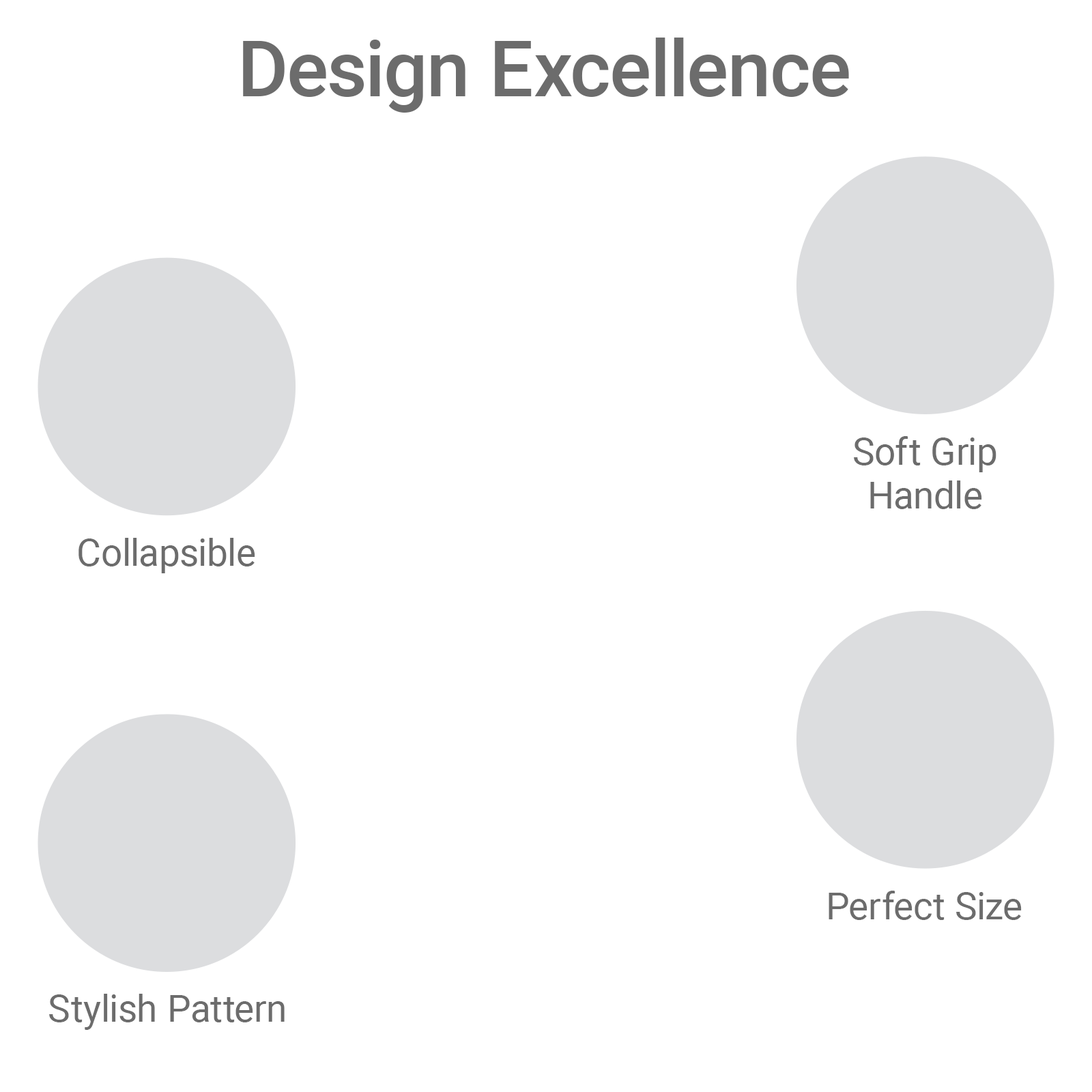
<style>
.page{position:relative;width:1092px;height:1092px;background:#ffffff}
.page>*{position:absolute;margin:0}
.t1{font:77.9px "Roboto-Medium";color:#6c6c6c}
.t2{font:37.9px/43.7px "Roboto-Regular";color:#6c6c6c}
.t3{font:37.9px "Roboto-Regular";color:#6c6c6c}
</style>
<div class="page">
<p class="t1" style="left:243px;top:38px;width:606px;height:75px">Design Excellence</p>
<p class="t2" style="left:854px;top:436px;width:142px;height:73px;text-align:center">Soft Grip<br>Handle</p>
<p class="t3" style="left:78px;top:538px;width:177px;height:35px">Collapsible</p>
<p class="t3" style="left:829px;top:891px;width:193px;height:29px">Perfect Size</p>
<p class="t3" style="left:49px;top:994px;width:236px;height:36px">Stylish Pattern</p>
</div>
